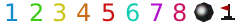
<style>
.page{position:relative;width:240px;height:24px;background:#ffffff}
.page>*{position:absolute;margin:0}
.t1{font:24px "DejaVuSans";color:#128dcc}
.t2{font:24px "DejaVuSans";color:#39cc12}
.t3{font:24px "DejaVuSans";color:#ccc612}
.t4{font:24px "DejaVuSans";color:#cc6e17}
.t5{font:24px "DejaVuSans";color:#cc1212}
.t6{font:24px "DejaVuSans";color:#12ccb4}
.t7{font:24px "DejaVuSans";color:#b012cc}
.t8{font:24px "DejaVuSans";color:#cc1261}
</style>
<div class="page">
<p class="t1" style="left:6px;top:3px;width:12px;height:18px">1</p>
<p class="t2" style="left:30px;top:3px;width:12px;height:18px">2</p>
<p class="t3" style="left:53px;top:3px;width:13px;height:19px">3</p>
<p class="t4" style="left:77px;top:3px;width:13px;height:18px">4</p>
<p class="t5" style="left:102px;top:3px;width:13px;height:19px">5</p>
<p class="t6" style="left:126px;top:3px;width:13px;height:19px">6</p>
<p class="t7" style="left:150px;top:3px;width:13px;height:18px">7</p>
<p class="t8" style="left:173px;top:3px;width:13px;height:19px">8</p>
</div>
